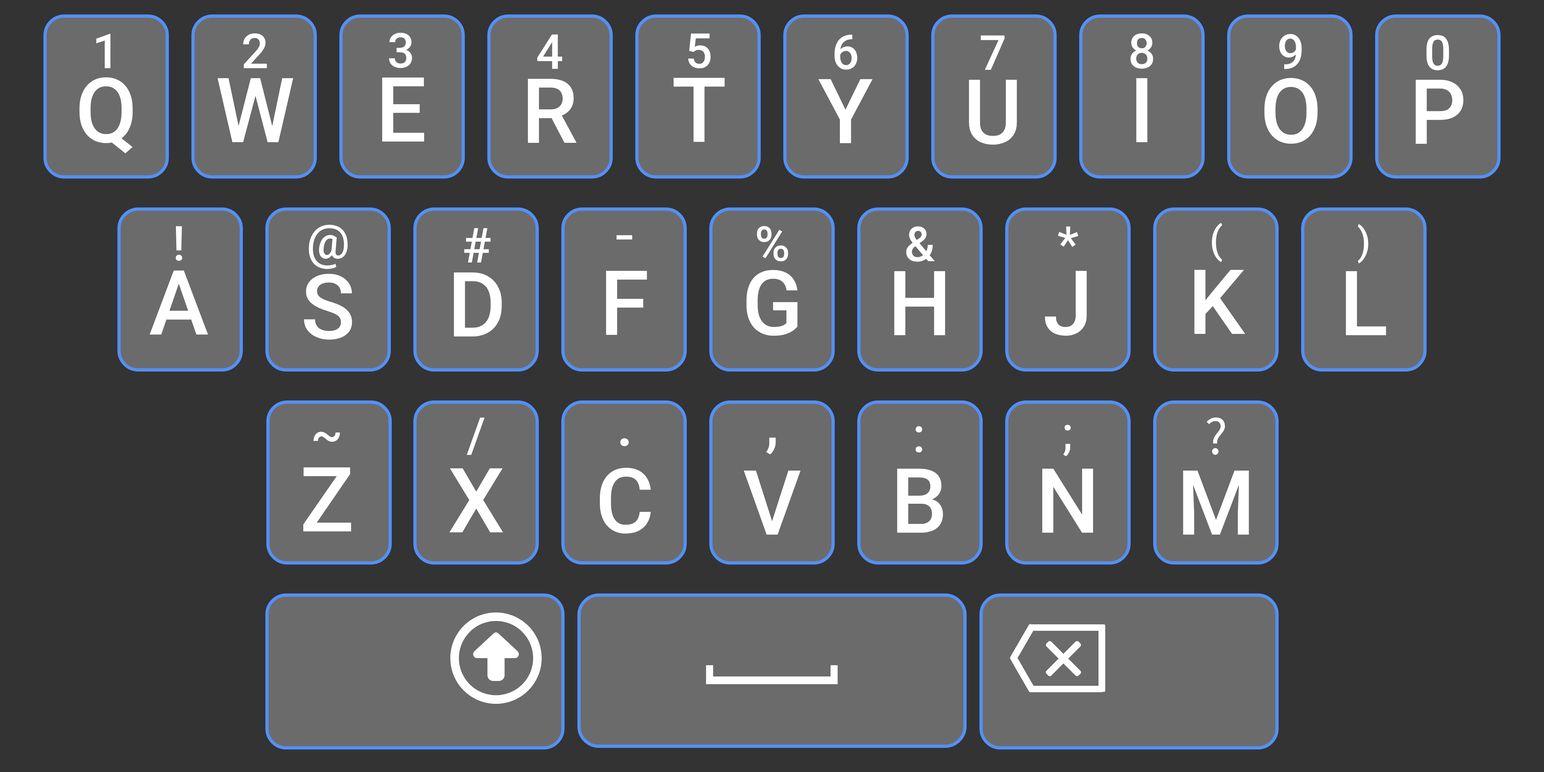
<style>
.page{position:relative;width:1544px;height:772px;background:#333333}
.page>*{position:absolute;margin:0}
.t1{font:48.3px/74px "Roboto-Medium";color:#ffffff}
.t2{font:90.1px/74px "Roboto-Medium";color:#ffffff}
.t3{font:48.3px/80.4px "Roboto-Medium";color:#ffffff}
.t4{font:90.1px/80.4px "Roboto-Medium";color:#ffffff}
.t5{font:38.6px/80.4px "Roboto-Medium";color:#ffffff}
.t6{font:61.1px/80.4px "SourceHanSansSC-Regular";color:#ffffff}
.t7{font:45px/83.6px "Roboto-Medium";color:#ffffff}
.t8{font:90.1px/83.6px "Roboto-Medium";color:#ffffff}
.t9{font:48.3px/80.4px "SourceHanSansSC-Regular";color:#ffffff}
.t10{font:61.1px/90.1px "Roboto-Medium";color:#ffffff}
.t11{font:90.1px/90.1px "Roboto-Medium";color:#ffffff}
.t12{font:61.1px/86.9px "Roboto-Medium";color:#ffffff}
.t13{font:90.1px/86.9px "Roboto-Medium";color:#ffffff}
</style>
<div class="page">
<p class="t1" style="left:79px;top:33px;width:54px;height:120px;text-align:center">1<br><span class="t2">Q</span></p>
<p class="t1" style="left:217px;top:33px;width:76px;height:109px;text-align:center">2<br><span class="t2">W</span></p>
<p class="t1" style="left:382px;top:32px;width:42px;height:110px;text-align:center">3<br><span class="t2">E</span></p>
<p class="t1" style="left:528px;top:34px;width:49px;height:109px;text-align:center">4<br><span class="t2">R</span></p>
<p class="t1" style="left:674px;top:33px;width:51px;height:109px;text-align:center">5<br><span class="t2">T</span></p>
<p class="t1" style="left:818px;top:34px;width:55px;height:109px;text-align:center">6<br><span class="t2">Y</span></p>
<p class="t1" style="left:969px;top:35px;width:48px;height:110px;text-align:center">7<br><span class="t2">U</span></p>
<p class="t1" style="left:1131px;top:33px;width:22px;height:109px;text-align:center">8<br><span class="t2">I</span></p>
<p class="t1" style="left:1264px;top:34px;width:54px;height:110px;text-align:center">9<br><span class="t2">O</span></p>
<p class="t1" style="left:1416px;top:35px;width:48px;height:109px;text-align:center">0<br><span class="t2">P</span></p>
<p class="t1" style="left:150px;top:226px;width:58px;height:109px;text-align:center">!<br><span class="t2">A</span></p>
<p class="t3" style="left:304px;top:225px;width:48px;height:115px;text-align:center">@<br><span class="t4">S</span></p>
<p class="t1" style="left:454px;top:228px;width:48px;height:109px;text-align:center">#<br><span class="t2">D</span></p>
<p class="t1" style="left:746px;top:226px;width:52px;height:110px;text-align:center">%<br><span class="t2">G</span></p>
<p class="t1" style="left:894px;top:226px;width:52px;height:109px;text-align:center">&amp;<br><span class="t2">H</span></p>
<p class="t1" style="left:1045px;top:226px;width:42px;height:110px;text-align:center">*<br><span class="t2">J</span></p>
<p class="t5" style="left:1195px;top:223px;width:50px;height:111px;text-align:center">(<br><span class="t4">K</span></p>
<p class="t5" style="left:1346px;top:224px;width:40px;height:111px;text-align:center">)<br><span class="t4">L</span></p>
<p class="t6" style="left:606px;top:235px;width:41px;height:100px;text-align:center">-<br><span class="t4">F</span></p>
<p class="t3" style="left:449px;top:418px;width:54px;height:114px;text-align:center">/<br><span class="t4">X</span></p>
<p class="t7" style="left:1042px;top:425px;width:52px;height:108px;text-align:center">;<br><span class="t8">N</span></p>
<p class="t9" style="left:1183px;top:417px;width:66px;height:118px;text-align:center">?<br><span class="t4">M</span></p>
<p class="t3" style="left:303px;top:432px;width:48px;height:99px;text-align:center">~<br><span class="t4">Z</span></p>
<p class="t10" style="left:744px;top:438px;width:57px;height:97px;text-align:center">,<br><span class="t11">V</span></p>
<p class="t3" style="left:897px;top:426px;width:46px;height:107px;text-align:center">:<br><span class="t4">B</span></p>
<p class="t12" style="left:600px;top:438px;width:51px;height:96px;text-align:center">.<br><span class="t13">C</span></p>
</div>
